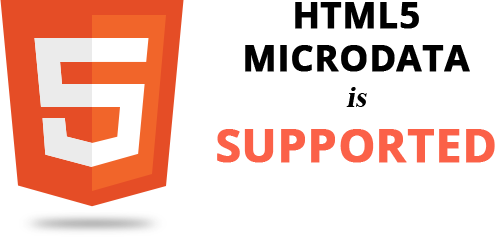
<style>
.page{position:relative;width:495px;height:237px;background:#ffffff}
.page>*{position:absolute;margin:0}
.t1{font:36px "OpenSans-Bold";color:#000000;text-transform:uppercase;font-weight:bold}
.t2{font:30px "TimesNewRomanPS-BoldMT";color:#000000;font-style:italic}
.t3{font:46px "OpenSans-Bold";color:#fb6148;text-transform:uppercase;font-weight:bold}
</style>
<div class="page">
<p class="t1" style="left:217px;top:2px;width:278px;height:161px;text-align:center">html5 MICRODATA<br><span class="t2">is<br></span><span class="t3">SUPPORTED</span></p>
</div>
